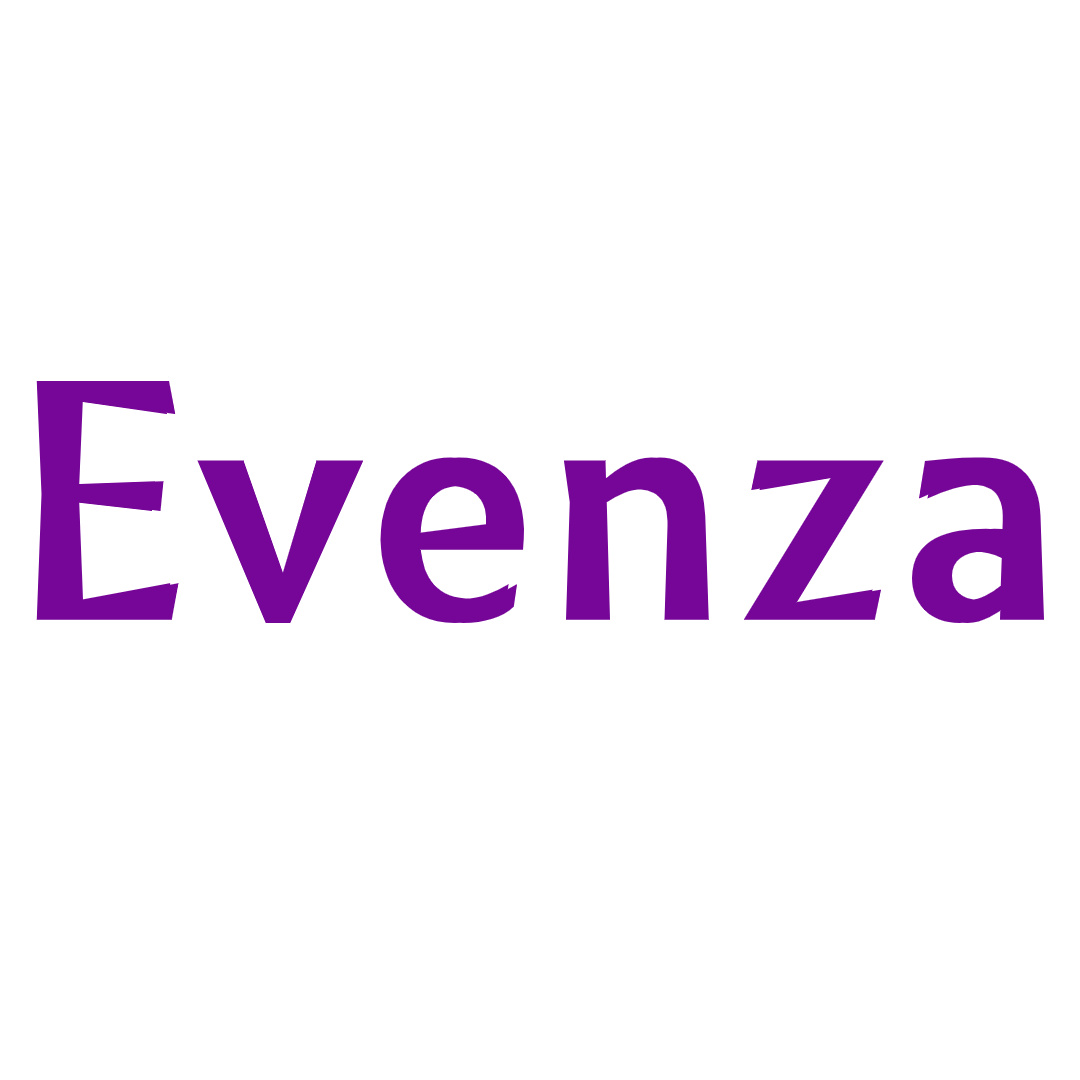
<style>
.page{position:relative;width:1080px;height:1080px;background:#ffffff}
.page>*{position:absolute;margin:0}
.t1{font:318.4px "Infini-Regular";color:#760698;font-weight:bold}
</style>
<div class="page">
<p class="t1" style="left:36px;top:381px;width:1008px;height:242px">Evenza</p>
</div>
